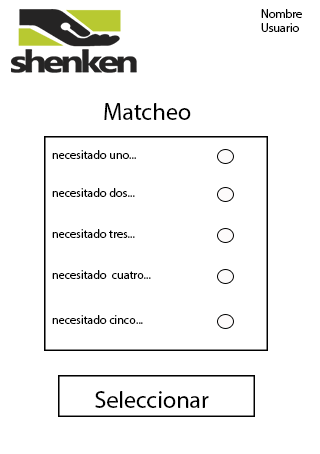
<style>
.page{position:relative;width:320px;height:454px;background:#ffffff}
.page>*{position:absolute;margin:0}
.t1{font:12px "MyriadPro-Regular";color:#000000}
.t2{font:24px "MyriadPro-Regular";color:#000000}
</style>
<div class="page">
<p class="t1" style="left:261px;top:9px;width:41px;height:23px">Nombre Usuario</p>
<p class="t2" style="left:104px;top:103px;width:87px;height:17px">Matcheo</p>
<p class="t1" style="left:52px;top:150px;width:84px;height:9px">necesitado uno...</p>
<p class="t1" style="left:52px;top:188px;width:83px;height:9px">necesitado dos...</p>
<p class="t1" style="left:52px;top:229px;width:83px;height:9px">necesitado tres...</p>
<p class="t1" style="left:52px;top:270px;width:99px;height:9px">necesitado  cuatro...</p>
<p class="t1" style="left:52px;top:315px;width:91px;height:9px">necesitado cinco...</p>
<p class="t2" style="left:95px;top:391px;width:114px;height:17px">Seleccionar</p>
</div>
